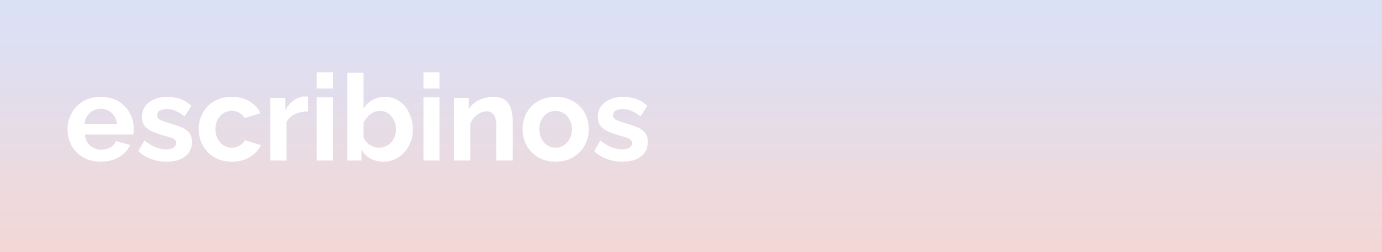
<style>
.page{position:relative;width:1382px;height:252px}
.page>*{position:absolute;margin:0}
.t1{font:120px "Raleway-Bold";color:#ffffff}
</style>
<div class="page">
<p class="t1" style="left:67px;top:72px;width:581px;height:90px">escribinos</p>
</div>
